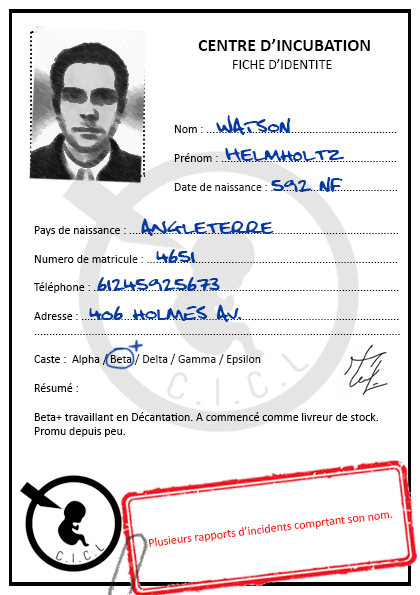
<style>
.page{position:relative;width:420px;height:595px;background:#ffffff}
.page>*{position:absolute;margin:0}
.t1{font:18px "Calibri-Bold";color:#000000}
.t2{font:14px "Calibri";color:#000000}
.t3{font:12px "Calibri"}
.t4{font:19px "FatboySlimBLTC(BRK)";color:#003aa4}
.t5{font:19px "FatboySlimBLTC2BRK";color:#003aa4}
.t6{font:12px "Calibri";color:#000000}
.t7{font:12px "Calibri";color:#fe0000}
</style>
<div class="page">
<p class="t1" style="left:198px;top:39px;width:172px;height:12px">CENTRE D’INCUBATION</p>
<p class="t2" style="left:233px;top:59px;width:99px;height:10px">FICHE D’IDENTITE</p>
<p class="t3" style="left:174px;top:125px;width:223px;height:66px">Nom : ...............................................................<br><br>Prénom : ..........................................................<br><br>Date de naissance : ..........................................</p>
<p class="t4" style="left:216px;top:115px;width:75px;height:20px">WATSON</p>
<p class="t4" style="left:225px;top:148px;width:119px;height:13px">Helmholtz</p>
<p class="t4" style="left:271px;top:177px;width:72px;height:15px">592 NF</p>
<p class="t5" style="left:141px;top:218px;width:133px;height:18px">Angleterre</p>
<p class="t6" style="left:34px;top:226px;width:366px;height:211px">Pays de naissance : .........................................................................................<br><br>Numero de matricule : ...................................................................................<br><br>Téléphone : .....................................................................................................<br><br>Adresse : .........................................................................................................<br>.........................................................................................................................<br><br>Caste :  Alpha / Beta / Delta / Gamma / Epsilon <br><br>Résumé :<br><br>Beta+ travaillant en Décantation. A commencé comme livreur de stock. <br>Promu depuis peu.</p>
<p class="t4" style="left:156px;top:249px;width:40px;height:14px">4651</p>
<p class="t4" style="left:97px;top:277px;width:123px;height:14px">61245925673</p>
<p class="t4" style="left:89px;top:304px;width:153px;height:18px">406 hOLMES AV.</p>
<p class="t7" style="left:148px;top:512px;width:245px;height:35px;rotate:-7deg">Plusieurs rapports d’incidents comprtant son nom.</p>
</div>
